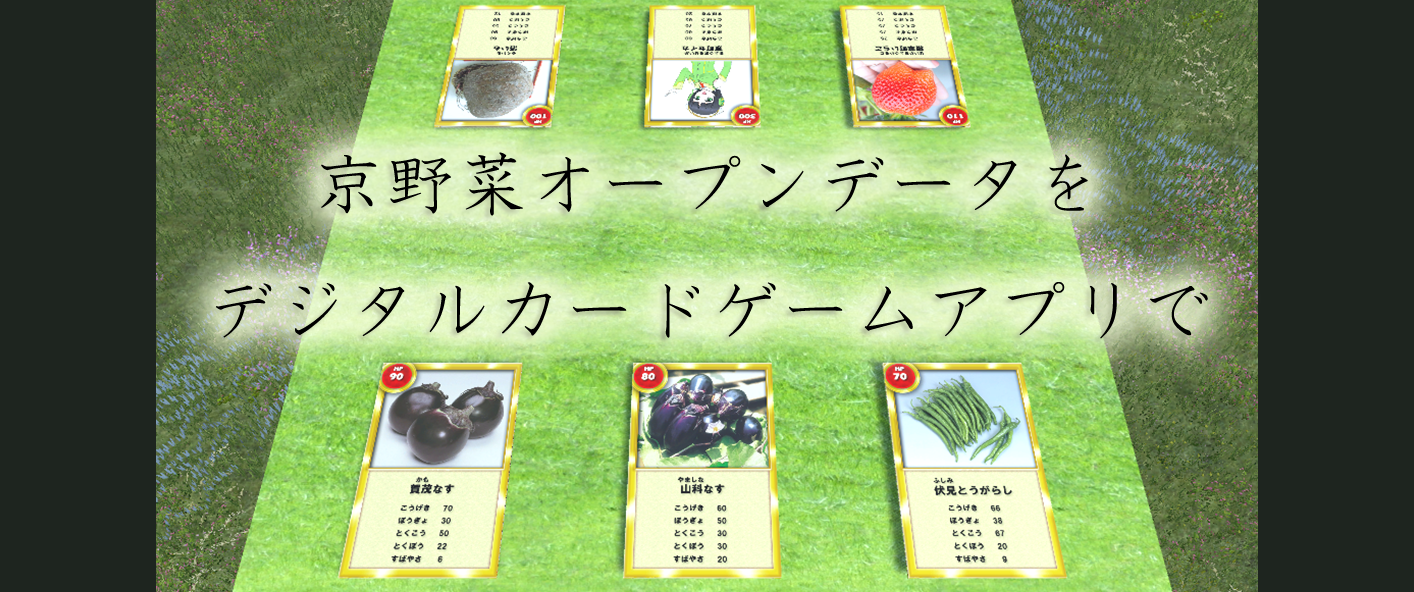
<style>
.page{position:relative;width:1414px;height:592px;background:#1e251f}
.page>*{position:absolute;margin:0}
.t1{font:72px "HGKyokashotai";color:#000000}
</style>
<div class="page">
<p class="t1" style="left:216px;top:152px;width:992px;height:187px;text-align:center">京野菜オープンデータを<br>デジタルカードゲームアプリで</p>
</div>
